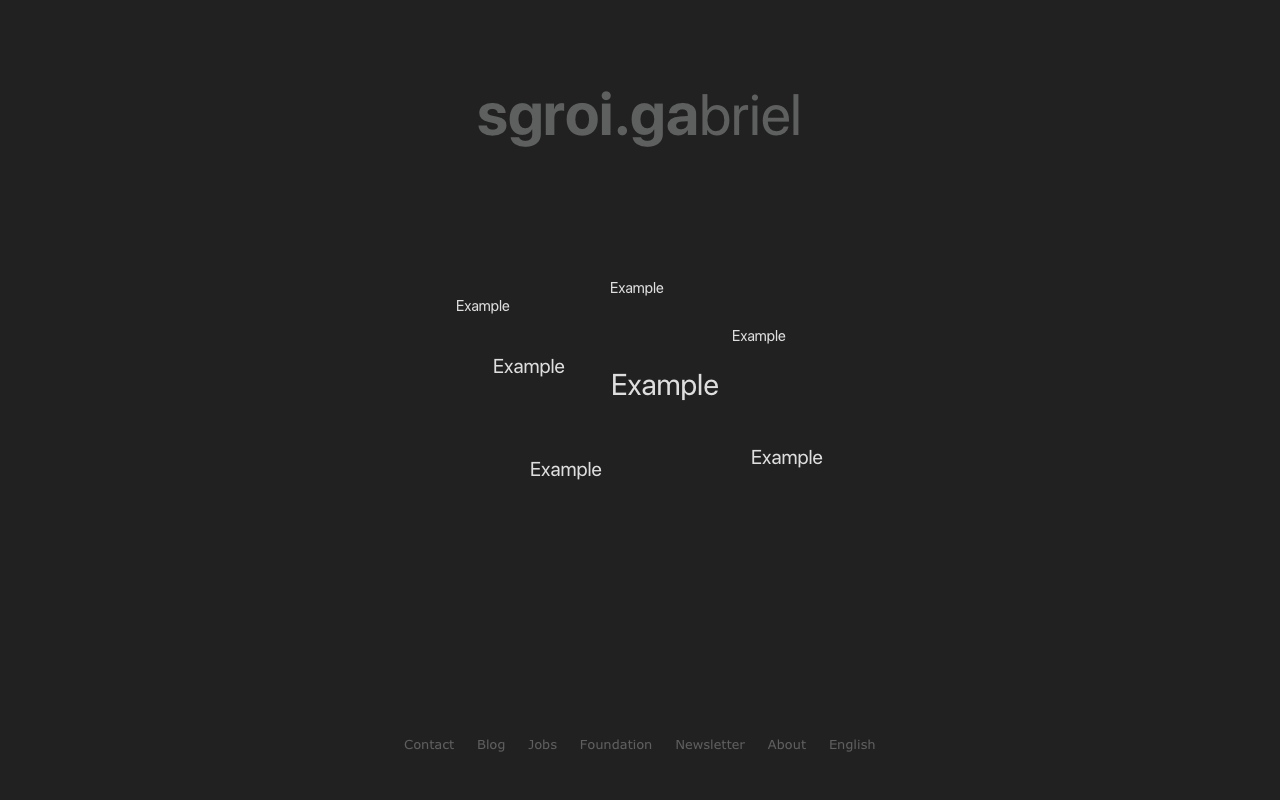
<style>
.page{position:relative;width:1280px;height:800px;background:#212121}
.page>*{position:absolute;margin:0}
.t1{font:60px "SFProDisplay-Bold";color:#5e5f5f}
.t2{font:58px "SFProDisplay-Regular";color:#5e5f5f}
.t3{font:15px "SFProDisplay-Regular";color:#dedede}
.t4{font:20px "SFProDisplay-Regular";color:#dedede}
.t5{font:30px "SFProDisplay-Regular";color:#dedede}
.t6{font:13px "Verdana";color:#5f5f5f}
</style>
<div class="page">
<p class="t1" style="left:478px;top:91px;width:321px;height:56px">sgroi.ga<span class="t2">briel</span></p>
<p class="t3" style="left:611px;top:282px;width:53px;height:14px">Example</p>
<p class="t3" style="left:457px;top:300px;width:53px;height:14px">Example</p>
<p class="t3" style="left:733px;top:330px;width:53px;height:14px">Example</p>
<p class="t4" style="left:494px;top:358px;width:71px;height:19px">Example</p>
<p class="t5" style="left:613px;top:373px;width:105px;height:28px">Example</p>
<p class="t4" style="left:752px;top:449px;width:71px;height:19px">Example</p>
<p class="t4" style="left:531px;top:461px;width:71px;height:19px">Example</p>
<p class="t6" style="left:404px;top:739px;width:471px;height:13px">Contact     Blog     Jobs     Foundation     Newsletter     About     English</p>
</div>
